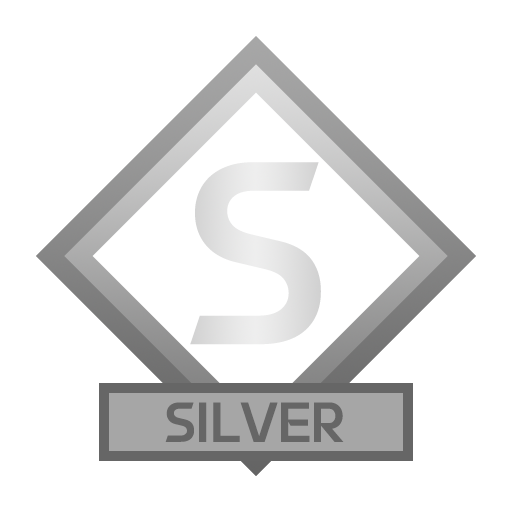
<style>
.page{position:relative;width:512px;height:512px;background:#ffffff}
.page>*{position:absolute;margin:0}
.t1{font:231.8px "yspotlight-regular";color:#e2e2e2}
.t2{font:50px "yspotlight-regular";color:#666666}
</style>
<div class="page">
<p class="t1" style="left:190px;top:162px;width:131px;height:183px">S</p>
<p class="t2" style="left:165px;top:402px;width:179px;height:40px">SILVER</p>
</div>
